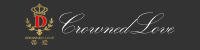
<style>
.page{position:relative;width:200px;height:50px;background:#333333}
.page>*{position:absolute;margin:0}
.t1{font:30px "KunstlerScript";color:#ffffff}
</style>
<div class="page">
<p class="t1" style="left:59px;top:12px;width:116px;height:22px">CrownedLove</p>
</div>
